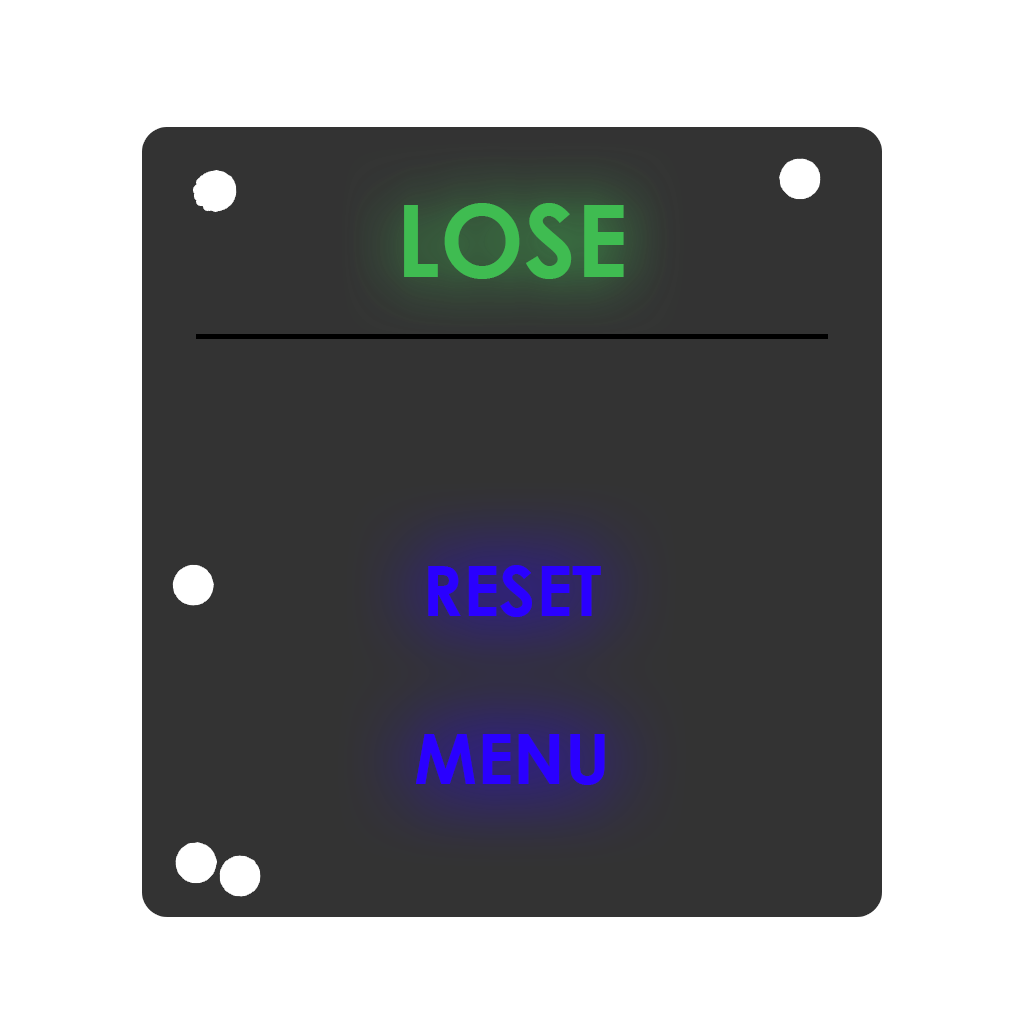
<style>
.page{position:relative;width:1024px;height:1024px;background:#ffffff}
.page>*{position:absolute;margin:0}
.t1{font:100px "CenturyGothic-Bold";color:#3fbc51}
.t2{font:70px "CenturyGothic-Bold";color:#2a00ff}
</style>
<div class="page">
<p class="t1" style="left:404px;top:203px;width:220px;height:76px">LOSE</p>
<p class="t2" style="left:416px;top:565px;width:189px;height:220px;text-align:center">RESET<br><br>MENU</p>
</div>
